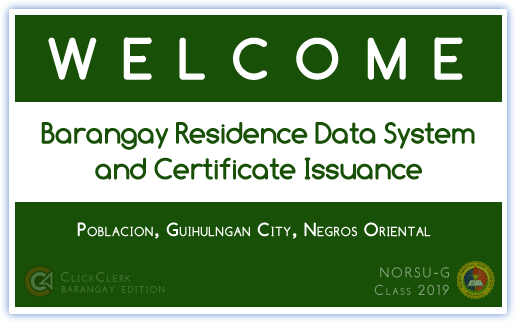
<style>
.page{position:relative;width:516px;height:323px;background:#175006}
.page>*{position:absolute;margin:0}
.t1{font:57px "Comfortaa-Bold";letter-spacing:0.447em;color:#ffffff;font-weight:bold}
.t2{font:18.7px "Comfortaa-Bold";letter-spacing:0.074em;color:#ffffff;font-variant:small-caps}
.t3{font:14.7px "Comfortaa";letter-spacing:0.147em;color:#84a27b;font-variant:small-caps}
.t4{font:13.6px "Comfortaa";letter-spacing:0.147em;color:#4a763d;font-variant:small-caps}
.t5{font:13.6px "Comfortaa";letter-spacing:0.147em;font-variant:small-caps}
</style>
<div class="page">
<p class="t1" style="left:48px;top:37px;width:415px;height:43px">WELCOME</p>
<p class="t2" style="left:77px;top:222px;width:354px;height:17px">Poblacion, Guihulngan City, Negros Oriental</p>
<p class="t3" style="left:374px;top:267px;width:75px;height:28px;text-align:right">NORSU-G<br>Class 2019</p>
<p class="t4" style="left:61px;top:272px;width:69px;height:10px">ClickClerk</p>
<p class="t5" style="left:61px;top:286px;width:104px;height:7px">barangay edition</p>
</div>
